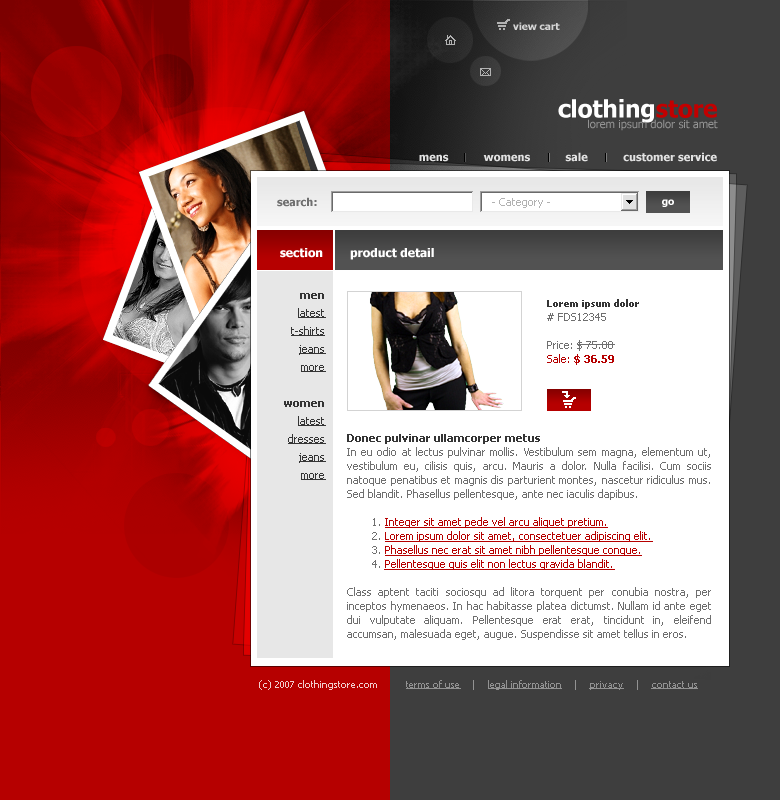
<style>
.page{position:relative;width:780px;height:800px;background:#ffffff}
.page>*{position:absolute;margin:0}
.t1{font:10px "Tahoma-Bold";color:#d5d5d5}
.t2{font:24px "Tahoma-Bold";color:#ffffff}
.t3{font:24px "Tahoma-Bold";color:#c20000}
.t4{font:11px "Tahoma";color:#949494}
.t5{font:11px "Tahoma-Bold";color:#e2e2e2}
.t6{font:11px "Tahoma-Bold";color:#6f6f6f}
.t7{font:11px "Tahoma";color:#b2b2b2}
.t8{font:10px "Tahoma-Bold";color:#ffffff}
.t9{font:12px "Tahoma-Bold";color:#ffffff}
.t10{font:11px/18px "Tahoma";color:#343434;text-decoration:underline}
.t11{font:11px/18px "Tahoma-Bold";color:#343434}
.t12{font:10px/14px "Tahoma-Bold";color:#343434}
.t13{font:11px/14px "Tahoma";color:#6f6f6f}
.t14{font:11px/14px "Tahoma";color:#b60000}
.t15{font:11px/14px "Tahoma-Bold";color:#b60000}
.t16{font:11px/14px "Tahoma-Bold";color:#343434}
.t17{font:11px/14px "Tahoma";color:#b60000;text-decoration:underline}
.t18{font:10px "Tahoma";color:#f0cccc}
.t19{font:10px "Tahoma";color:#929292;text-decoration:underline}
.t20{font:10px "Tahoma";color:#929292}
</style>
<div class="page">
<p class="t1" style="left:513px;top:22px;width:47px;height:8px">view cart</p>
<p class="t2" style="left:558px;top:99px;width:159px;height:24px">clothing<span class="t3">store</span></p>
<p class="t4" style="left:588px;top:119px;width:130px;height:12px">lorem ipsum dolor sit amet</p>
<p class="t5" style="left:419px;top:152px;width:298px;height:10px">mens           womens           sale           customer service</p>
<p class="t6" style="left:277px;top:197px;width:40px;height:10px">search:</p>
<p class="t7" style="left:492px;top:198px;width:58px;height:10px">- Category -</p>
<p class="t8" style="left:662px;top:199px;width:12px;height:8px">go</p>
<p class="t9" style="left:280px;top:248px;width:43px;height:10px">section</p>
<p class="t9" style="left:350px;top:248px;width:84px;height:12px">product detail</p>
<p class="t10" style="left:284px;top:293px;width:42px;height:187px;text-align:right"><span class="t11">men<br></span>latest<br>t-shirts<br>jeans<br>more<br><br><span class="t11">women<br></span>latest<br>dresses<br>jeans<br>more</p>
<p class="t12" style="left:547px;top:299px;width:92px;height:22px">Lorem ipsum dolor<br><span class="t13"># FDS12345</span></p>
<p class="t13" style="left:547px;top:340px;width:68px;height:25px">Price: $ 75.00 <br><span class="t14">Sale: </span><span class="t15">$ 36.59</span></p>
<p class="t13" style="left:347px;top:434px;width:364px;height:206px;text-align:justify"><span class="t16">Donec pulvinar ullamcorper metus</span><br>In eu odio at lectus pulvinar mollis. Vestibulum sem magna, elementum ut, vestibulum eu, cilisis quis, arcu. Mauris a dolor. Nulla facilisi. Cum sociis natoque penatibus et magnis dis parturient montes, nascetur ridiculus mus. Sed blandit. Phasellus pellentesque, ante nec iaculis dapibus.<br><br>1. <span class="t17">Integer sit amet pede vel arcu aliquet pretium.<br></span>2. <span class="t17">Lorem ipsum dolor sit amet, consectetuer adipiscing elit.<br></span>3. <span class="t17">Phasellus nec erat sit amet nibh pellentesque congue.<br></span>4. <span class="t17">Pellentesque quis elit non lectus gravida blandit.<br></span><br>Class aptent taciti sociosqu ad litora torquent per conubia nostra, per inceptos hymenaeos. In hac habitasse platea dictumst. Nullam id ante eget dui vulputate aliquam. Pellentesque erat erat, tincidunt in, eleifend accumsan, malesuada eget, augue. Suspendisse sit amet tellus in eros.</p>
<p class="t18" style="left:259px;top:680px;width:118px;height:10px">(c) 2007 clothingstore.com</p>
<p class="t19" style="left:406px;top:680px;width:292px;height:10px">terms of use<span class="t20">    |    </span>legal information<span class="t20">    |    </span>privacy<span class="t20">    |    </span>contact us</p>
</div>
